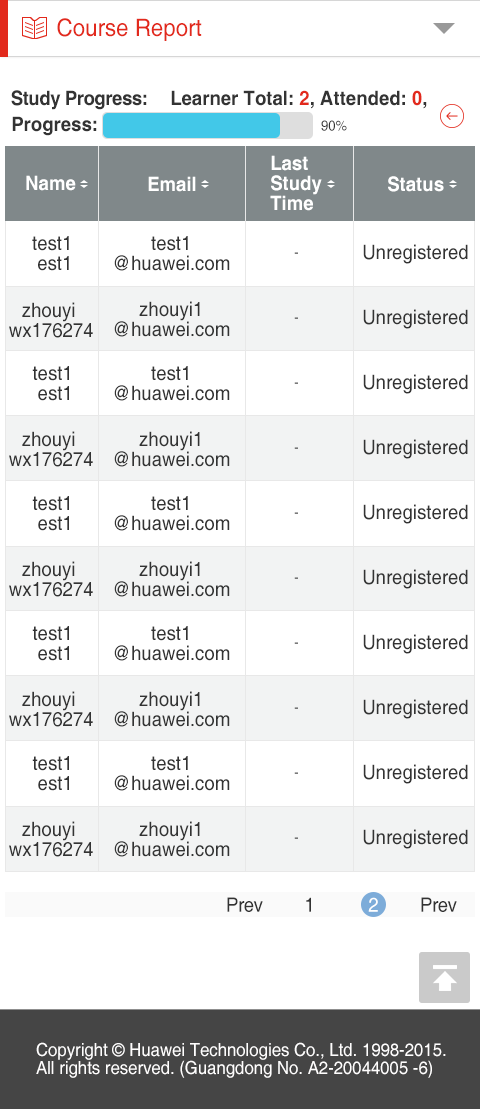
<style>
.page{position:relative;width:480px;height:1109px;background:#ffffff}
.page>*{position:absolute;margin:0}
.t1{font:24px "Helvetica";color:#e2291c;scale:0.93 1}
.t2{font:20px "Helvetica-Bold";letter-spacing:-0.025em;color:#333333;scale:0.93 1}
.t3{font:20px "Helvetica-Bold";color:#333333;scale:0.93 1}
.t4{font:20px "Helvetica-Bold";color:#e2291c;scale:0.93 1}
.t5{font:14px "Helvetica";color:#333333;scale:0.93 1}
.t6{font:20px/20px "Helvetica-Bold";color:#ffffff;scale:0.93 1}
.t7{font:20px "Helvetica-Bold";color:#ffffff;scale:0.93 1}
.t8{font:20px/20px "Helvetica";color:#333333;scale:0.93 1}
.t9{font:20px "Helvetica";color:#333333;scale:0.93 1}
.t10{font:14px "Helvetica";scale:0.93 1}
.t11{font:20px "Helvetica";letter-spacing:-0.025em;color:#333333;scale:0.93 1}
.t12{font:20px "Helvetica";letter-spacing:-0.025em;color:#ffffff;scale:0.93 1}
.t13{font:18px/18px "Helvetica";color:#fffefe;scale:0.93 1}
</style>
<div class="page">
<p class="t1" style="left:57px;top:18px;width:145px;height:23px">Course Report</p>
<p class="t2" style="left:11px;top:90px;width:136px;height:20px">Study Progress:</p>
<p class="t3" style="left:171px;top:90px;width:256px;height:19px">Learner Total: <span class="t4">2</span>, Attended: <span class="t4">0</span>,</p>
<p class="t3" style="left:12px;top:116px;width:85px;height:20px">Progress:</p>
<p class="t5" style="left:321px;top:120px;width:26px;height:11px">90%</p>
<p class="t6" style="left:270px;top:155px;width:52px;height:56px">Last <br>Study <br>Time</p>
<p class="t7" style="left:26px;top:175px;width:50px;height:16px">Name</p>
<p class="t7" style="left:148px;top:176px;width:48px;height:16px">Email</p>
<p class="t7" style="left:388px;top:176px;width:56px;height:16px">Status</p>
<p class="t8" style="left:32px;top:236px;width:37px;height:35px;text-align:center">test1<br> est1</p>
<p class="t8" style="left:114px;top:236px;width:116px;height:35px;text-align:center">test1<br>@huawei.com</p>
<p class="t9" style="left:363px;top:244px;width:105px;height:20px">Unregistered</p>
<p class="t10" style="left:294px;top:252px;width:4px;height:2px">-</p>
<p class="t8" style="left:9px;top:302px;width:84px;height:36px;text-align:center">zhouyi <br>wx176274</p>
<p class="t8" style="left:114px;top:301px;width:116px;height:36px;text-align:center">zhouyi1<br>@huawei.com</p>
<p class="t10" style="left:294px;top:317px;width:4px;height:2px">-</p>
<p class="t9" style="left:363px;top:309px;width:105px;height:20px">Unregistered</p>
<p class="t8" style="left:32px;top:366px;width:37px;height:35px;text-align:center">test1 <br>est1</p>
<p class="t8" style="left:114px;top:366px;width:116px;height:35px;text-align:center">test1<br>@huawei.com</p>
<p class="t9" style="left:363px;top:374px;width:105px;height:20px">Unregistered</p>
<p class="t10" style="left:294px;top:382px;width:4px;height:2px">-</p>
<p class="t8" style="left:9px;top:431px;width:84px;height:36px;text-align:center">zhouyi <br>wx176274</p>
<p class="t8" style="left:114px;top:431px;width:116px;height:36px;text-align:center">zhouyi1<br>@huawei.com</p>
<p class="t10" style="left:294px;top:447px;width:4px;height:2px">-</p>
<p class="t9" style="left:363px;top:439px;width:105px;height:20px">Unregistered</p>
<p class="t8" style="left:32px;top:496px;width:37px;height:35px;text-align:center">test1 <br>est1</p>
<p class="t8" style="left:114px;top:496px;width:116px;height:35px;text-align:center">test1<br>@huawei.com</p>
<p class="t9" style="left:363px;top:504px;width:105px;height:20px">Unregistered</p>
<p class="t10" style="left:294px;top:512px;width:4px;height:2px">-</p>
<p class="t8" style="left:9px;top:561px;width:84px;height:36px;text-align:center">zhouyi <br>wx176274</p>
<p class="t8" style="left:114px;top:561px;width:116px;height:36px;text-align:center">zhouyi1<br>@huawei.com</p>
<p class="t9" style="left:363px;top:569px;width:105px;height:20px">Unregistered</p>
<p class="t10" style="left:294px;top:577px;width:4px;height:2px">-</p>
<p class="t8" style="left:32px;top:626px;width:37px;height:35px;text-align:center">test1 <br>est1</p>
<p class="t8" style="left:114px;top:626px;width:116px;height:35px;text-align:center">test1<br>@huawei.com</p>
<p class="t9" style="left:363px;top:634px;width:105px;height:20px">Unregistered</p>
<p class="t10" style="left:294px;top:642px;width:4px;height:2px">-</p>
<p class="t8" style="left:9px;top:691px;width:84px;height:36px;text-align:center">zhouyi <br>wx176274</p>
<p class="t8" style="left:114px;top:691px;width:116px;height:36px;text-align:center">zhouyi1<br>@huawei.com</p>
<p class="t9" style="left:363px;top:699px;width:105px;height:20px">Unregistered</p>
<p class="t10" style="left:294px;top:707px;width:4px;height:2px">-</p>
<p class="t8" style="left:32px;top:756px;width:37px;height:35px;text-align:center">test1 <br>est1</p>
<p class="t8" style="left:114px;top:756px;width:116px;height:35px;text-align:center">test1<br>@huawei.com</p>
<p class="t10" style="left:294px;top:772px;width:4px;height:2px">-</p>
<p class="t9" style="left:363px;top:764px;width:105px;height:20px">Unregistered</p>
<p class="t8" style="left:9px;top:821px;width:84px;height:36px;text-align:center">zhouyi <br>wx176274</p>
<p class="t8" style="left:114px;top:821px;width:116px;height:36px;text-align:center">zhouyi1<br>@huawei.com</p>
<p class="t9" style="left:363px;top:829px;width:105px;height:20px">Unregistered</p>
<p class="t10" style="left:294px;top:837px;width:4px;height:2px">-</p>
<p class="t11" style="left:227px;top:897px;width:36px;height:15px">Prev</p>
<p class="t11" style="left:306px;top:897px;width:5px;height:15px">1</p>
<p class="t12" style="left:368px;top:897px;width:10px;height:15px">2</p>
<p class="t11" style="left:421px;top:897px;width:36px;height:15px">Prev</p>
<p class="t13" style="left:36px;top:1042px;width:410px;height:36px">Copyright © Huawei Technologies Co., Ltd. 1998-2015. <br>All rights reserved. (Guangdong No. A2-20044005 -6)</p>
</div>
